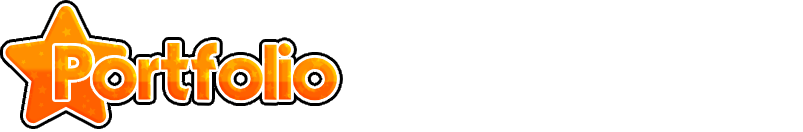
<style>
.page{position:relative;width:803px;height:132px;background:#ffffff}
.page>*{position:absolute;margin:0}
.t1{font:77px "Mouser"}
</style>
<div class="page">
<p class="t1" style="left:54px;top:42px;width:283px;height:59px">Portfolio</p>
</div>
